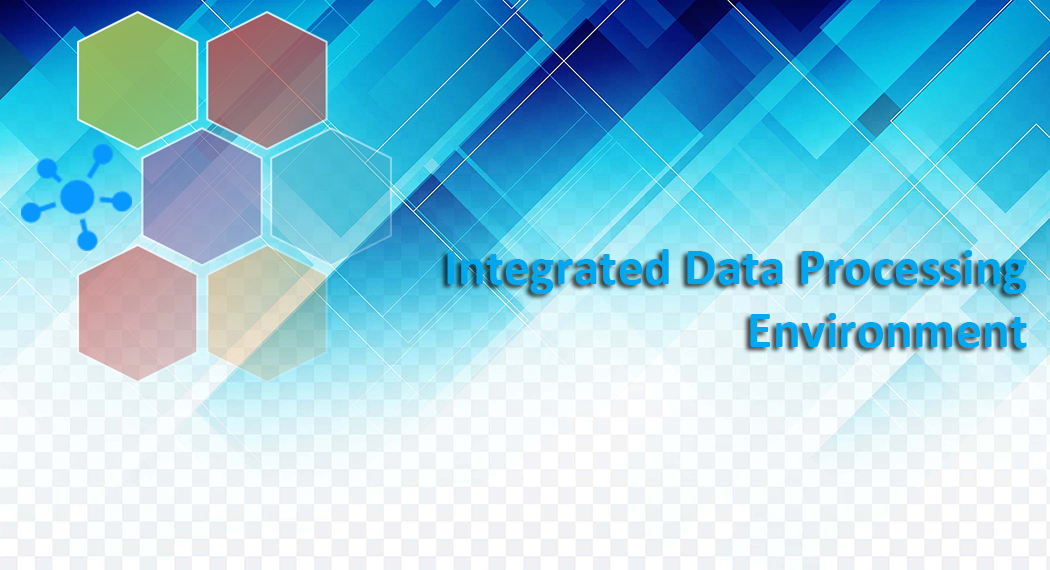
<style>
.page{position:relative;width:1050px;height:570px}
.page>*{position:absolute;margin:0}
.t1{font:52.2px "Calibri-Bold";color:#00a8f0}
</style>
<div class="page">
<p class="t1" style="left:447px;top:249px;width:580px;height:99px;text-align:right">Integrated Data Processing<br>Environment</p>
</div>
